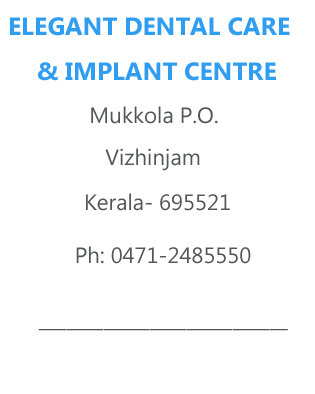
<style>
.page{position:relative;width:315px;height:394px;background:#ffffff}
.page>*{position:absolute;margin:0}
.t1{font:25px "MyanmarText-Bold";color:#2f9ef0}
.t2{font:22.2px "MyanmarText";color:#545558}
</style>
<div class="page">
<p class="t1" style="left:10px;top:17px;width:280px;height:19px">ELEGANT DENTAL CARE</p>
<p class="t1" style="left:38px;top:62px;width:238px;height:19px">&amp; IMPLANT CENTRE</p>
<p class="t2" style="left:91px;top:106px;width:127px;height:18px">Mukkola P.O.</p>
<p class="t2" style="left:105px;top:148px;width:95px;height:23px">Vizhinjam</p>
<p class="t2" style="left:86px;top:193px;width:144px;height:18px">Kerala- 695521</p>
<p class="t2" style="left:76px;top:246px;width:175px;height:18px">Ph: 0471-2485550</p>
<p class="t2" style="left:38px;top:329px;width:250px;height:2px">___________________________</p>
</div>
